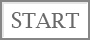
<style>
.page{position:relative;width:90px;height:40px;background:#ffffff}
.page>*{position:absolute;margin:0}
.t1{font:20.8px "LucidaBright";color:#696969}
</style>
<div class="page">
<p class="t1" style="left:11px;top:12px;width:69px;height:16px">START</p>
</div>
